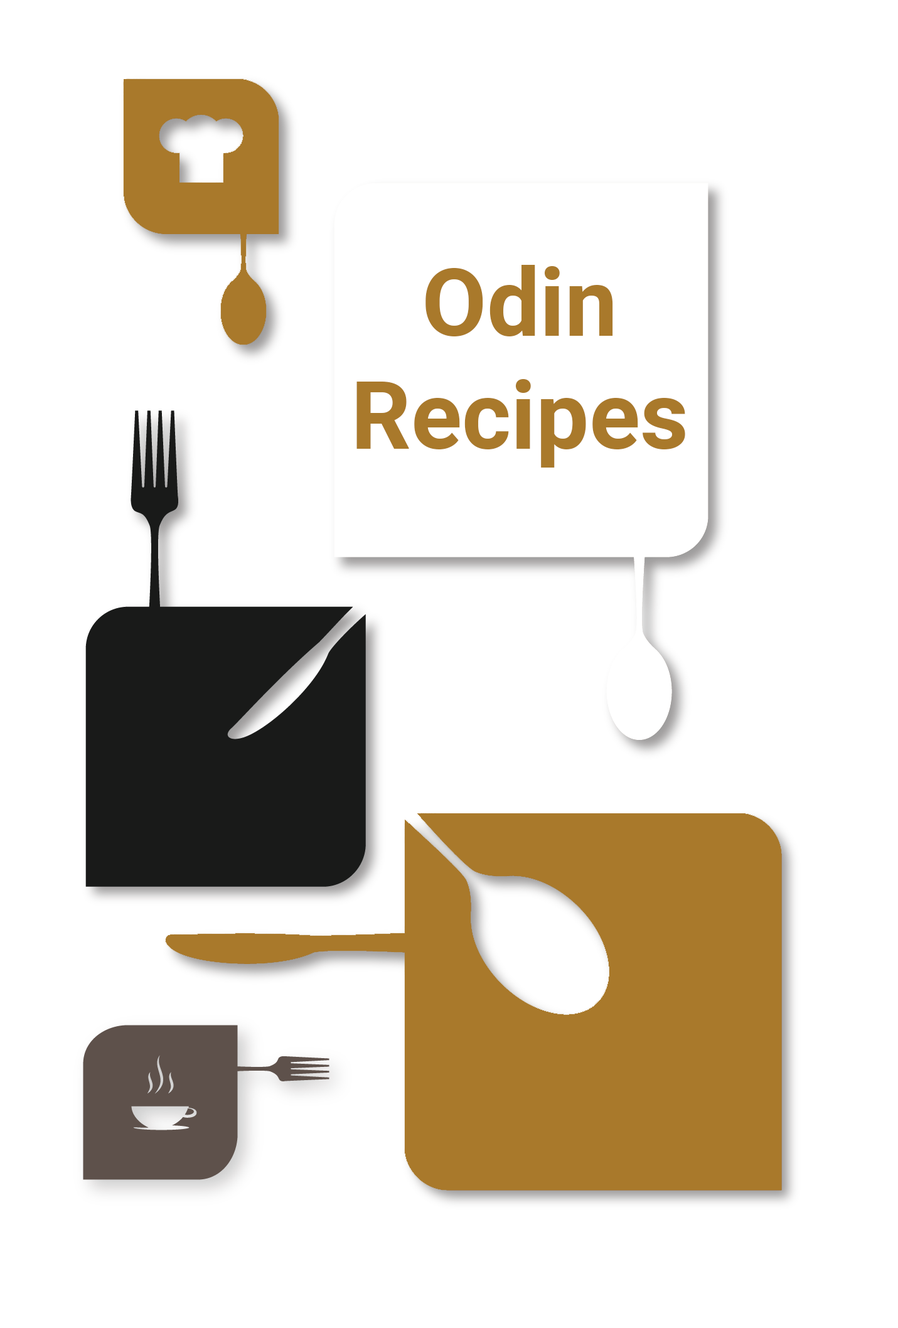
<style>
.page{position:relative;width:898px;height:1328px;background:#ffffff}
.page>*{position:absolute;margin:0}
.t1{font:94.1px "Roboto-Bold";color:#a9792b}
</style>
<div class="page">
<p class="t1" style="left:356px;top:265px;width:329px;height:203px;text-align:center">Odin Recipes</p>
</div>
